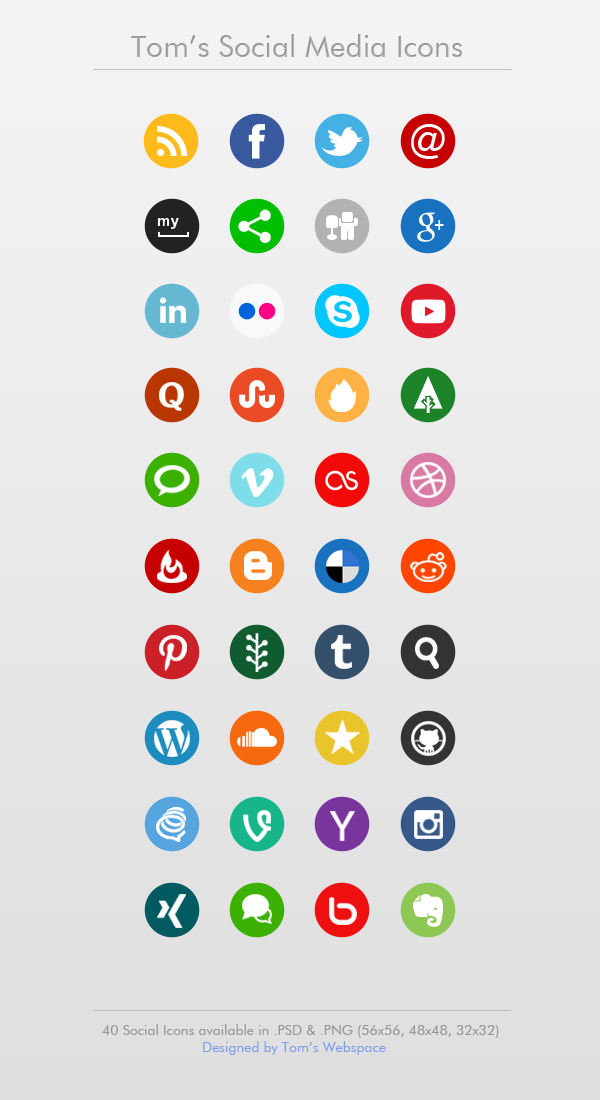
<style>
.page{position:relative;width:600px;height:1100px}
.page>*{position:absolute;margin:0}
.t1{font:30px "FuturaBookBT";color:#adadad}
.t2{font:14px "FuturaBookBT";color:#979797}
.t3{font:14px "FuturaBookBT";color:#7e9fe9}
</style>
<div class="page">
<p class="t1" style="left:131px;top:34px;width:332px;height:23px">Tom’s Social Media Icons</p>
<p class="t2" style="left:102px;top:1024px;width:397px;height:14px">40 Social Icons available in .PSD &amp; .PNG (56x56, 48x48, 32x32)</p>
<p class="t3" style="left:203px;top:1041px;width:183px;height:14px">Designed by Tom’s Webspace</p>
</div>
